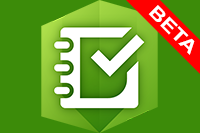
<style>
.page{position:relative;width:200px;height:133px;background:#3c8b09}
.page>*{position:absolute;margin:0}
.t1{font:18px "Arial-BoldMT";color:#ffffff;scale:1.25 1}
</style>
<div class="page">
<p class="t1" style="left:148px;top:5px;width:47px;height:50px;rotate:45deg">BETA</p>
</div>
